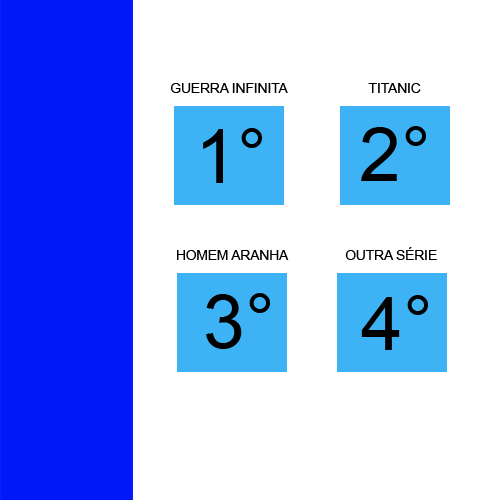
<style>
.page{position:relative;width:500px;height:500px;background:#ffffff}
.page>*{position:absolute;margin:0}
.t1{font:13.6px "ArialMT";color:#000000;text-transform:uppercase}
.t2{font:75px "ArialMT";color:#000000;text-transform:uppercase}
</style>
<div class="page">
<p class="t1" style="left:170px;top:83px;width:118px;height:10px">Guerra infinita</p>
<p class="t1" style="left:368px;top:83px;width:53px;height:10px">titanic</p>
<p class="t2" style="left:361px;top:126px;width:65px;height:55px">2°</p>
<p class="t2" style="left:203px;top:128px;width:59px;height:55px">1°</p>
<p class="t1" style="left:177px;top:250px;width:112px;height:10px">homem aranha</p>
<p class="t1" style="left:345px;top:247px;width:92px;height:13px">outra série</p>
<p class="t2" style="left:206px;top:293px;width:64px;height:56px">3°</p>
<p class="t2" style="left:361px;top:295px;width:67px;height:55px">4°</p>
</div>
